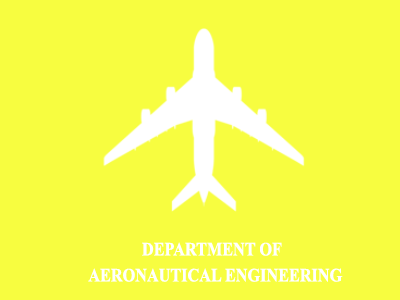
<style>
.page{position:relative;width:400px;height:300px;background:#f7fd40}
.page>*{position:absolute;margin:0}
.t1{font:32px/13px "TimesNewRomanPS-BoldMT";color:#ffffff;scale:0.87 1}
</style>
<div class="page">
<p class="t1" style="left:88px;top:242px;width:255px;height:40px;text-align:justify">DEPARTMENT OF<br> <br>    AERONAUTICAL ENGINEERING</p>
</div>
